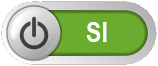
<style>
.page{position:relative;width:158px;height:66px;background:#6bac2e}
.page>*{position:absolute;margin:0}
.t1{font:28px "ArialNarrow-Bold";color:#ffffff}
</style>
<div class="page">
<p class="t1" style="left:86px;top:22px;width:21px;height:20px">SI</p>
</div>
